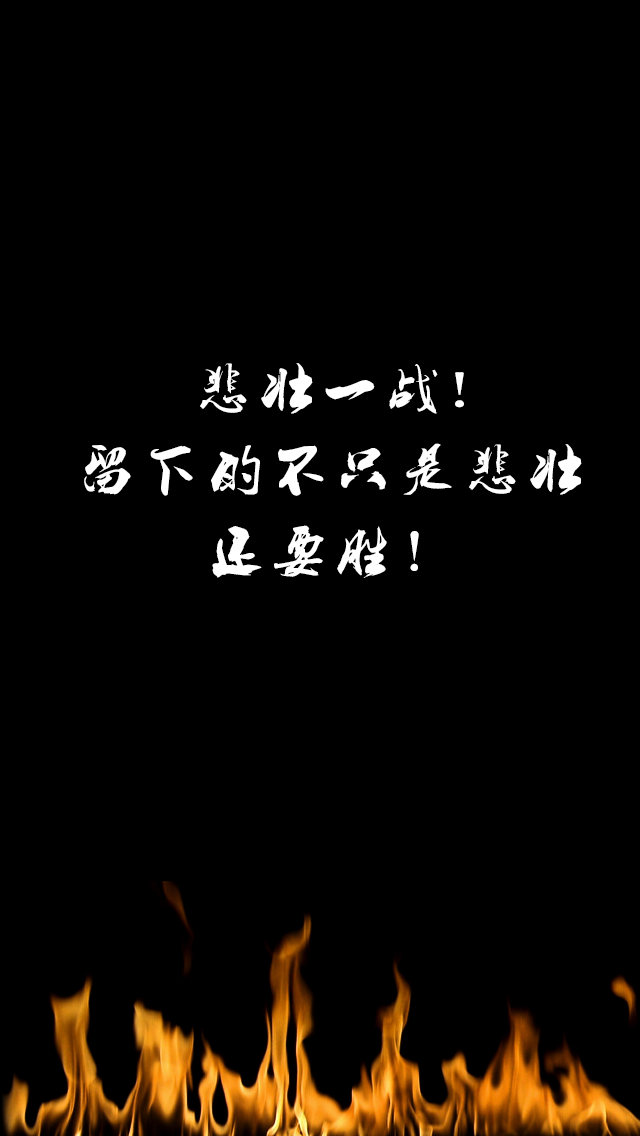
<style>
.page{position:relative;width:640px;height:1136px;background:#000000}
.page>*{position:absolute;margin:0}
.t1{font:54.4px/81.7px "-";letter-spacing:0.2em;color:#ffffff}
</style>
<div class="page">
<p class="t1" style="left:84px;top:363px;width:498px;height:215px;text-align:center">悲壮一战!<br>留下的不只是悲壮<br>还要胜！</p>
</div>
